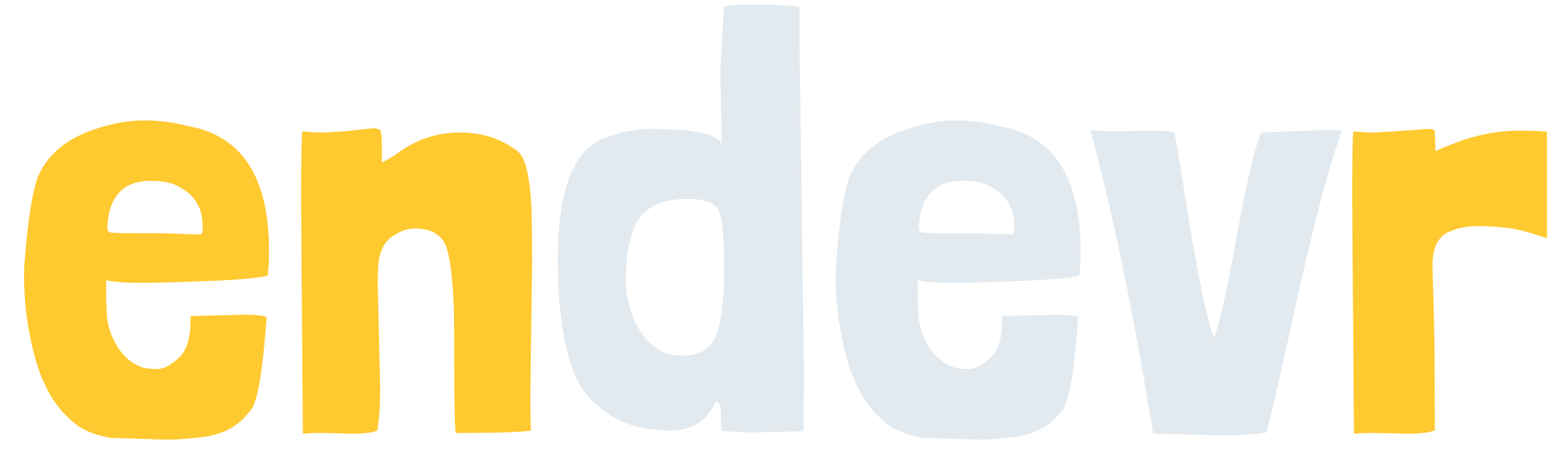
<style>
.page{position:relative;width:1568px;height:449px;background:#ffffff}
.page>*{position:absolute;margin:0}
.t1{font:603.1px "LondrinaSolid-Regular";color:#e3eaef}
.t2{font:603.1px "LondrinaSolid-Regular";color:#ffc930}
</style>
<div class="page">
<p class="t1" style="left:557px;top:4px;width:785px;height:436px">dev</p>
<p class="t2" style="left:24px;top:120px;width:508px;height:320px">en</p>
<p class="t2" style="left:1352px;top:128px;width:195px;height:306px">r</p>
</div>
